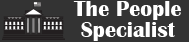
<style>
.page{position:relative;width:189px;height:42px;background:#333333}
.page>*{position:absolute;margin:0}
.t1{font:22.2px/21.1px "BritannicBold";color:#ffffff}
</style>
<div class="page">
<p class="t1" style="left:73px;top:1px;width:108px;height:40px;text-align:center">The People Specialist</p>
</div>
